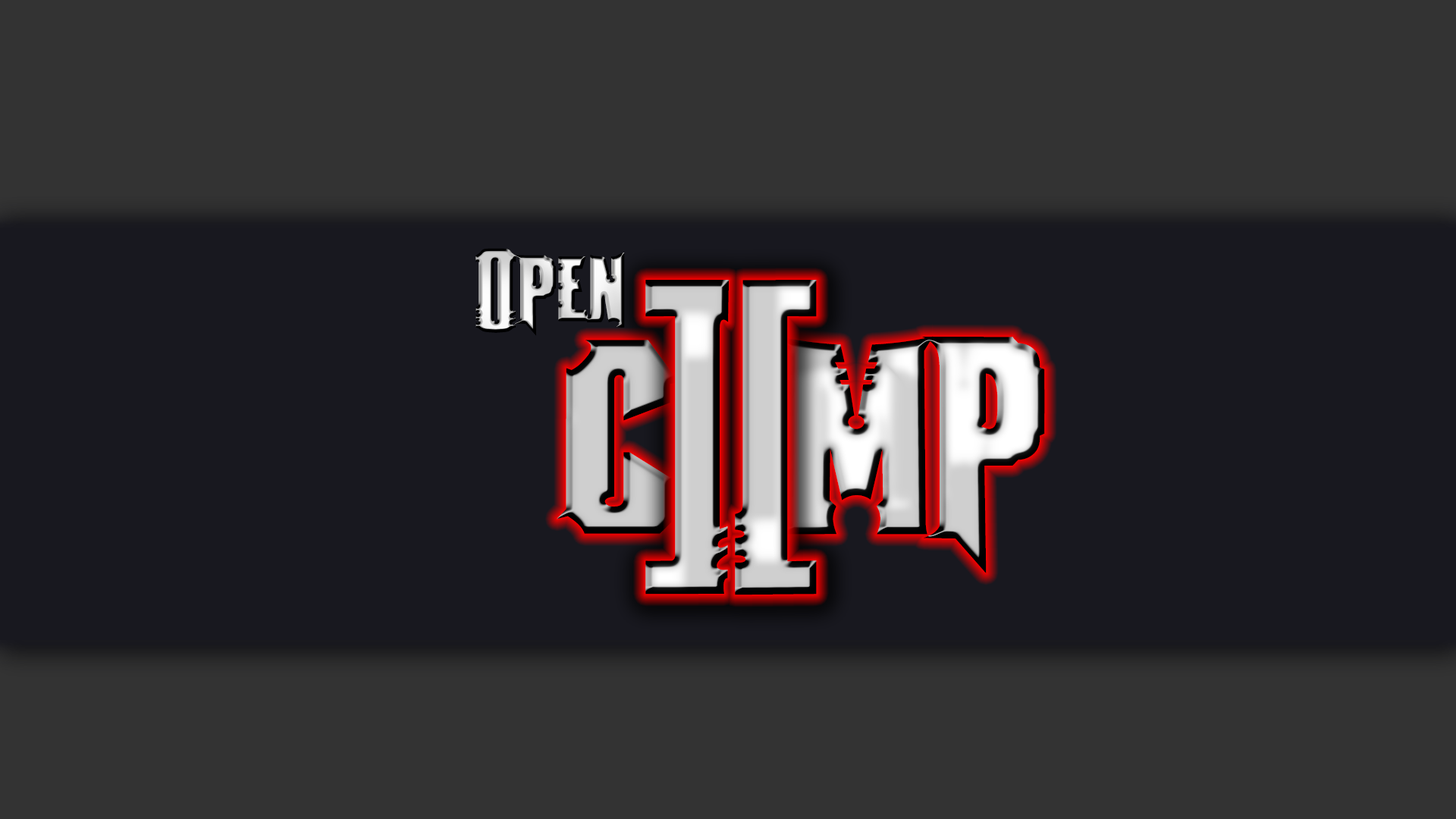
<style>
.page{position:relative;width:1456px;height:819px;background:#333333}
.page>*{position:absolute;margin:0}
.t1{font:80.7px "fontmageddon"}
.t2{font:254.3px "fontmageddon";scale:0.94 1}
.t3{font:238.4px "fontmageddon"}
</style>
<div class="page">
<p class="t1" style="left:475px;top:248px;width:150px;height:88px">Open</p>
<p class="t2" style="left:645px;top:280px;width:172px;height:315px">][</p>
<p class="t3" style="left:557px;top:336px;width:488px;height:237px">c  mp</p>
</div>
